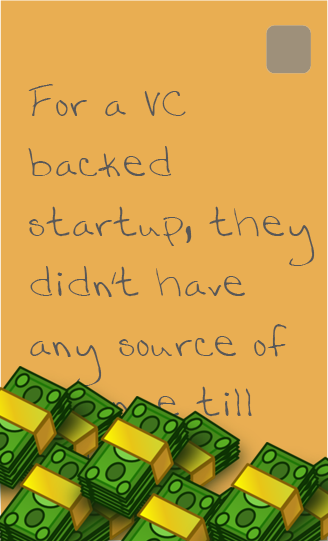
<style>
.page{position:relative;width:328px;height:541px;background:#e9ae52}
.page>*{position:absolute;margin:0}
.t1{font:40px/60px "Katyhandwriting1-Medium";color:#585858}
</style>
<div class="page">
<p class="t1" style="left:28px;top:84px;width:287px;height:393px">For a VC backed startup, they didn't have any source of revenue till 2015.</p>
</div>
